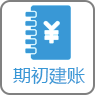
<style>
.page{position:relative;width:95px;height:95px;background:#ffffff}
.page>*{position:absolute;margin:0}
.t1{font:18px "MicrosoftYaHei";color:#3998d6}
</style>
<div class="page">
<p class="t1" style="left:13px;top:67px;width:72px;height:18px">期初建账</p>
</div>
